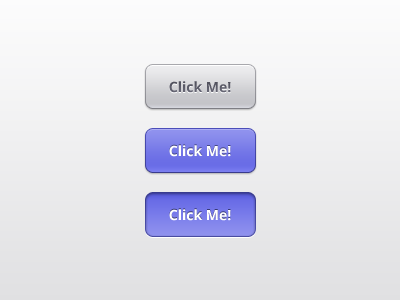
<style>
.page{position:relative;width:400px;height:300px}
.page>*{position:absolute;margin:0}
.t1{font:14px "OpenSans-Bold";color:#5b5b68}
.t2{font:14px "OpenSans-Bold";color:#ffffff}
</style>
<div class="page">
<p class="t1" style="left:169px;top:81px;width:62px;height:12px">Click Me!</p>
<p class="t2" style="left:169px;top:145px;width:62px;height:12px">Click Me!</p>
<p class="t2" style="left:169px;top:209px;width:62px;height:12px">Click Me!</p>
</div>
